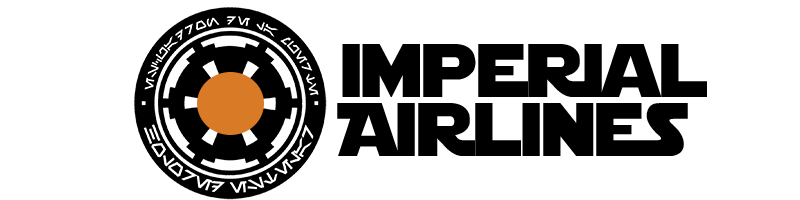
<style>
.page{position:relative;width:800px;height:200px;background:#ffffff}
.page>*{position:absolute;margin:0}
.t1{font:75px/58.3px "StarJediRounded";color:#000000}
</style>
<div class="page">
<p class="t1" style="left:337px;top:44px;width:370px;height:112px">imperial<br>Airlines</p>
</div>
